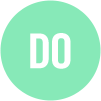
<style>
.page{position:relative;width:101px;height:101px;background:#87e9b8}
.page>*{position:absolute;margin:0}
.t1{font:48px "TradeGothic-BoldCondTwenty";letter-spacing:-0.05em;color:#fffefe}
</style>
<div class="page">
<p class="t1" style="left:30px;top:33px;width:41px;height:36px">DO</p>
</div>
